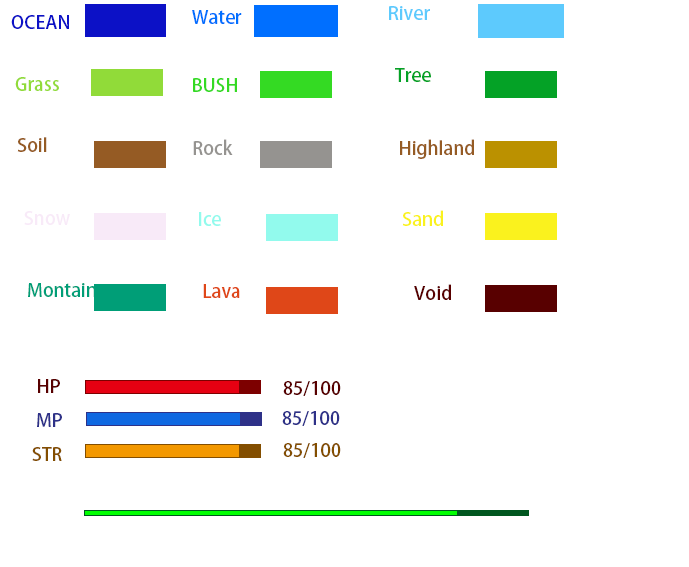
<style>
.page{position:relative;width:689px;height:567px;background:#ffffff}
.page>*{position:absolute;margin:0}
.t1{font:18.3px "AdobeHeitiStd-Regular";color:#5dcafd}
.t2{font:18.3px "AdobeHeitiStd-Regular";color:#0c11c6}
.t3{font:18.3px "AdobeHeitiStd-Regular";color:#006fff}
.t4{font:18.3px "AdobeHeitiStd-Regular";color:#91db39}
.t5{font:18.3px "AdobeHeitiStd-Regular";color:#34da23}
.t6{font:18.3px "AdobeHeitiStd-Regular";color:#04a226}
.t7{font:18.3px "AdobeHeitiStd-Regular";color:#955b24}
.t8{font:18.3px "AdobeHeitiStd-Regular";color:#959390}
.t9{font:18.3px "AdobeHeitiStd-Regular";color:#f8eaf8}
.t10{font:18.3px "AdobeHeitiStd-Regular";color:#92faed}
.t11{font:18.3px "AdobeHeitiStd-Regular";color:#faf21e}
.t12{font:18.3px "AdobeHeitiStd-Regular";color:#009e77}
.t13{font:18.3px "AdobeHeitiStd-Regular";color:#df4718}
.t14{font:18.3px "AdobeHeitiStd-Regular";color:#580000}
.t15{font:18.3px "AdobeHeitiStd-Regular";color:#2e3188}
.t16{font:18.3px "AdobeHeitiStd-Regular";color:#834e00}
</style>
<div class="page">
<p class="t1" style="left:389px;top:6px;width:41px;height:14px">River</p>
<p class="t2" style="left:11px;top:15px;width:58px;height:14px">OCEAN</p>
<p class="t3" style="left:192px;top:10px;width:50px;height:14px">Water</p>
<p class="t4" style="left:15px;top:77px;width:44px;height:14px">Grass</p>
<p class="t5" style="left:193px;top:78px;width:44px;height:14px">BUSH</p>
<p class="t6" style="left:395px;top:68px;width:36px;height:14px">Tree</p>
<p class="t7" style="left:17px;top:137px;width:30px;height:15px">Soil</p>
<p class="t8" style="left:193px;top:139px;width:40px;height:16px">Rock</p>
<p class="t7" style="left:400px;top:139px;width:74px;height:20px">Highland</p>
<p class="t9" style="left:24px;top:211px;width:46px;height:14px">Snow</p>
<p class="t10" style="left:199px;top:212px;width:22px;height:14px">Ice</p>
<p class="t11" style="left:402px;top:210px;width:41px;height:16px">Sand</p>
<p class="t12" style="left:28px;top:283px;width:68px;height:14px">Montain</p>
<p class="t13" style="left:203px;top:284px;width:37px;height:14px">Lava</p>
<p class="t14" style="left:414px;top:284px;width:37px;height:16px">Void</p>
<p class="t14" style="left:38px;top:379px;width:22px;height:14px">HP</p>
<p class="t14" style="left:283px;top:381px;width:58px;height:15px">85/100</p>
<p class="t15" style="left:37px;top:413px;width:25px;height:14px">MP</p>
<p class="t15" style="left:282px;top:411px;width:58px;height:15px">85/100</p>
<p class="t16" style="left:32px;top:447px;width:30px;height:14px">STR</p>
<p class="t16" style="left:283px;top:443px;width:58px;height:15px">85/100</p>
</div>
